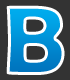
<style>
.page{position:relative;width:70px;height:80px;background:#333333}
.page>*{position:absolute;margin:0}
.t1{font:100px "BerlinSansFBDemi-Bold";letter-spacing:0.2em}
</style>
<div class="page">
<p class="t1" style="left:6px;top:5px;width:59px;height:70px">B</p>
</div>
